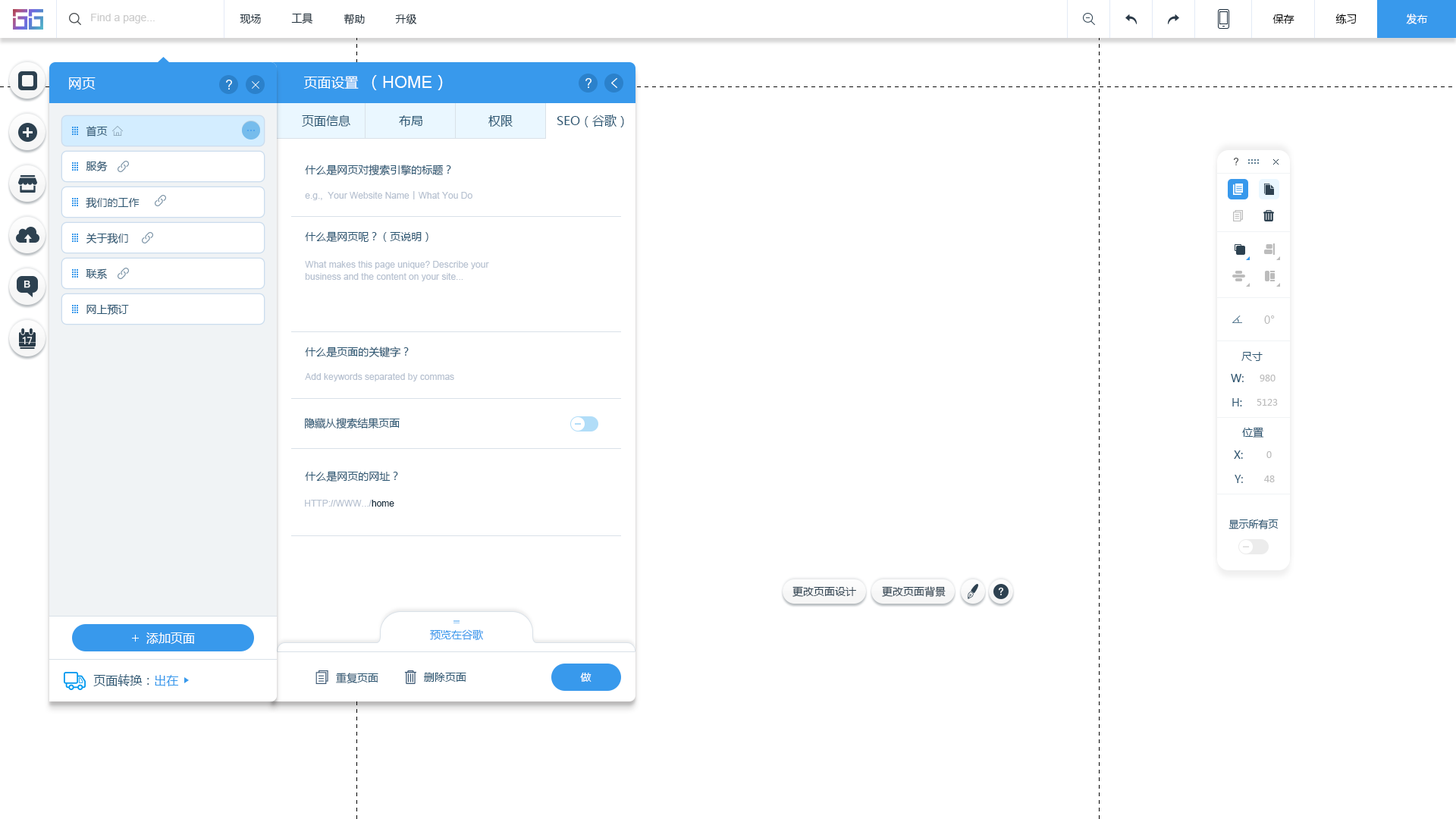
<style>
.page{position:relative;width:1456px;height:819px;background:#ffffff}
.page>*{position:absolute;margin:0}
.t1{font:10.6px "ArialMT";color:#cccccc}
.t2{font:10.6px "MicrosoftYaHei";color:#20303c}
.t3{font:10.6px "MicrosoftYaHei";color:#000000}
.t4{font:10.6px "MicrosoftYaHei";color:#ffffff}
.t5{font:13.6px "MicrosoftYaHei";color:#ffffff}
.t6{font:16.7px "ArialMT";color:#ffffff}
.t7{font:16.7px "MicrosoftYaHei";color:#ffffff}
.t8{font:10.6px "MicrosoftYaHei";color:#2b5672}
.t9{font:12.1px "MicrosoftYaHei";color:#2b5672}
.t10{font:9.1px "ArialMT";color:#b6c1d0}
.t11{font:9.1px "MicrosoftYaHei";color:#b6c1d0}
.t12{font:9.1px/12.1px "ArialMT";color:#b6c1d0}
.t13{font:10.6px "MicrosoftYaHei";color:#bcbcbc}
.t14{font:9.1px "MicrosoftYaHei";color:#bcbcbc}
.t15{font:9.1px "ArialMT";color:#162d3d}
.t16{font:9.9px "MicrosoftYaHei";color:#2b5672}
.t17{font:10.6px "MicrosoftYaHei";color:#2d4150}
.t18{font:10.6px "MicrosoftYaHei";color:#3899ec}
.t19{font:12.1px "MicrosoftYaHei";color:#ffffff}
.t20{font:9.1px "MicrosoftYaHei";color:#2b5672}
.t21{font:9.1px "MicrosoftYaHei";color:#3899ec}
</style>
<div class="page">
<p class="t1" style="left:91px;top:14px;width:64px;height:10px">Find a page...</p>
<p class="t2" style="left:240px;top:14px;width:21px;height:10px">现场</p>
<p class="t2" style="left:291px;top:13px;width:22px;height:11px">工具</p>
<p class="t2" style="left:344px;top:14px;width:21px;height:11px">帮助</p>
<p class="t2" style="left:395px;top:14px;width:22px;height:10px">升级</p>
<p class="t3" style="left:1272px;top:14px;width:22px;height:10px">保存</p>
<p class="t3" style="left:1335px;top:14px;width:22px;height:10px">练习</p>
<p class="t4" style="left:1406px;top:14px;width:22px;height:10px">发布</p>
<p class="t5" style="left:69px;top:77px;width:27px;height:12px">网页</p>
<p class="t5" style="left:303px;top:76px;width:56px;height:13px">页面设置</p>
<p class="t6" style="left:372px;top:75px;width:71px;height:15px"><span class="t7">（</span>HOME<span class="t7">）</span></p>
<p class="t8" style="left:86px;top:126px;width:22px;height:10px">首页</p>
<p class="t9" style="left:302px;top:115px;width:48px;height:12px">页面信息</p>
<p class="t9" style="left:399px;top:115px;width:23px;height:12px">布局</p>
<p class="t9" style="left:488px;top:115px;width:25px;height:12px">权限</p>
<p class="t9" style="left:557px;top:115px;width:67px;height:12px">SEO（谷歌）</p>
<p class="t8" style="left:86px;top:161px;width:22px;height:10px">服务</p>
<p class="t8" style="left:305px;top:165px;width:146px;height:11px">什么是网页对搜索引擎的标题？</p>
<p class="t8" style="left:86px;top:197px;width:54px;height:12px">我们的工作</p>
<p class="t10" style="left:305px;top:191px;width:167px;height:9px">e.g.,  Your Website Name<span class="t11">丨</span>What You Do</p>
<p class="t8" style="left:86px;top:233px;width:42px;height:11px">关于我们</p>
<p class="t8" style="left:305px;top:231px;width:123px;height:11px">什么是网页呢？（页说明）</p>
<p class="t8" style="left:86px;top:268px;width:21px;height:11px">联系</p>
<p class="t12" style="left:305px;top:261px;width:184px;height:20px">What makes this page unique? Describe your<br>business and the content on your site...</p>
<p class="t8" style="left:86px;top:304px;width:43px;height:11px">网上预订</p>
<p class="t13" style="left:1264px;top:315px;width:11px;height:9px">0°</p>
<p class="t8" style="left:305px;top:347px;width:104px;height:10px">什么是页面的关键字？</p>
<p class="t8" style="left:1241px;top:352px;width:22px;height:9px">尺寸</p>
<p class="t10" style="left:305px;top:373px;width:149px;height:8px">Add keywords separated by commas</p>
<p class="t8" style="left:1231px;top:374px;width:13px;height:8px">W:</p>
<p class="t14" style="left:1260px;top:375px;width:15px;height:6px">980</p>
<p class="t8" style="left:1232px;top:398px;width:10px;height:8px">H:</p>
<p class="t14" style="left:1257px;top:399px;width:21px;height:7px">5123</p>
<p class="t8" style="left:305px;top:418px;width:95px;height:11px">隐藏从搜索结果页面</p>
<p class="t8" style="left:1242px;top:427px;width:22px;height:11px">位置</p>
<p class="t8" style="left:1234px;top:450px;width:9px;height:9px">X:</p>
<p class="t14" style="left:1266px;top:451px;width:6px;height:7px">0</p>
<p class="t8" style="left:305px;top:471px;width:93px;height:11px">什么是网页的网址？</p>
<p class="t8" style="left:1235px;top:475px;width:8px;height:8px">Y:</p>
<p class="t14" style="left:1264px;top:475px;width:11px;height:7px">48</p>
<p class="t10" style="left:305px;top:500px;width:89px;height:7px">HTTP://WWW.../<span class="t15">home</span></p>
<p class="t16" style="left:1228px;top:519px;width:51px;height:10px">显示所有页</p>
<p class="t17" style="left:792px;top:586px;width:64px;height:11px">更改页面设计</p>
<p class="t17" style="left:882px;top:586px;width:64px;height:11px">更改页面背景</p>
<p class="t18" style="left:430px;top:629px;width:53px;height:11px">预览在谷歌</p>
<p class="t19" style="left:146px;top:632px;width:49px;height:12px">添加页面</p>
<p class="t20" style="left:93px;top:674px;width:86px;height:12px">页面转换：<span class="t21">出在</span></p>
<p class="t8" style="left:336px;top:673px;width:42px;height:11px">重复页面</p>
<p class="t8" style="left:424px;top:673px;width:42px;height:9px">删除页面</p>
<p class="t4" style="left:580px;top:673px;width:11px;height:9px">做</p>
</div>
